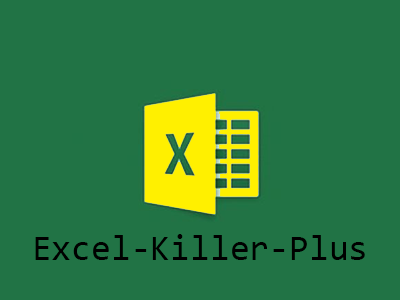
<style>
.page{position:relative;width:400px;height:300px;background:#217345}
.page>*{position:absolute;margin:0}
.t1{font:36px "Consolas";color:#000000}
</style>
<div class="page">
<p class="t1" style="left:35px;top:234px;width:330px;height:26px">Excel-Killer-Plus</p>
</div>
